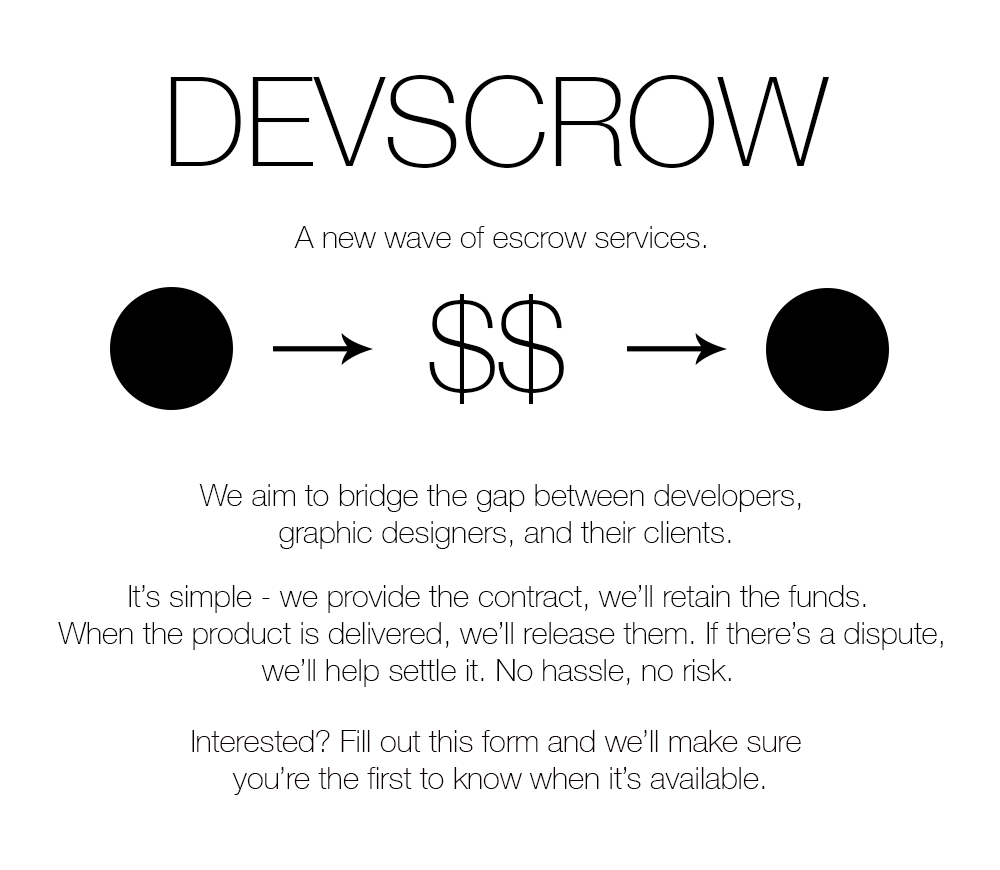
<style>
.page{position:relative;width:1000px;height:870px;background:#ffffff}
.page>*{position:absolute;margin:0}
.t1{font:123.6px "HelveticaNeue-Thin";color:#000000}
.t2{font:30.9px "HelveticaNeue-Thin";color:#000000}
.t3{font:30.9px "HelveticaNeue-Thin";color:#0b0000}
</style>
<div class="page">
<p class="t1" style="left:170px;top:75px;width:659px;height:93px">DEVSCROW</p>
<p class="t2" style="left:294px;top:226px;width:412px;height:22px">A new wave of escrow services.</p>
<p class="t1" style="left:429px;top:294px;width:135px;height:110px">$$</p>
<p class="t2" style="left:199px;top:484px;width:602px;height:65px;text-align:center">We aim to bridge the gap between developers, <br>graphic designers, and their clients.</p>
<p class="t2" style="left:58px;top:585px;width:885px;height:102px;text-align:center">It’s simple - we provide the contract, we’ll retain the funds. <br>When the product is delivered, we’ll release them. If there’s a dispute,<br>we’ll help settle it. No hassle, no risk.</p>
<p class="t3" style="left:192px;top:730px;width:609px;height:65px;text-align:center">Interested? Fill out this form and we’ll make sure <br>you’re the first to know when it’s available.</p>
</div>
